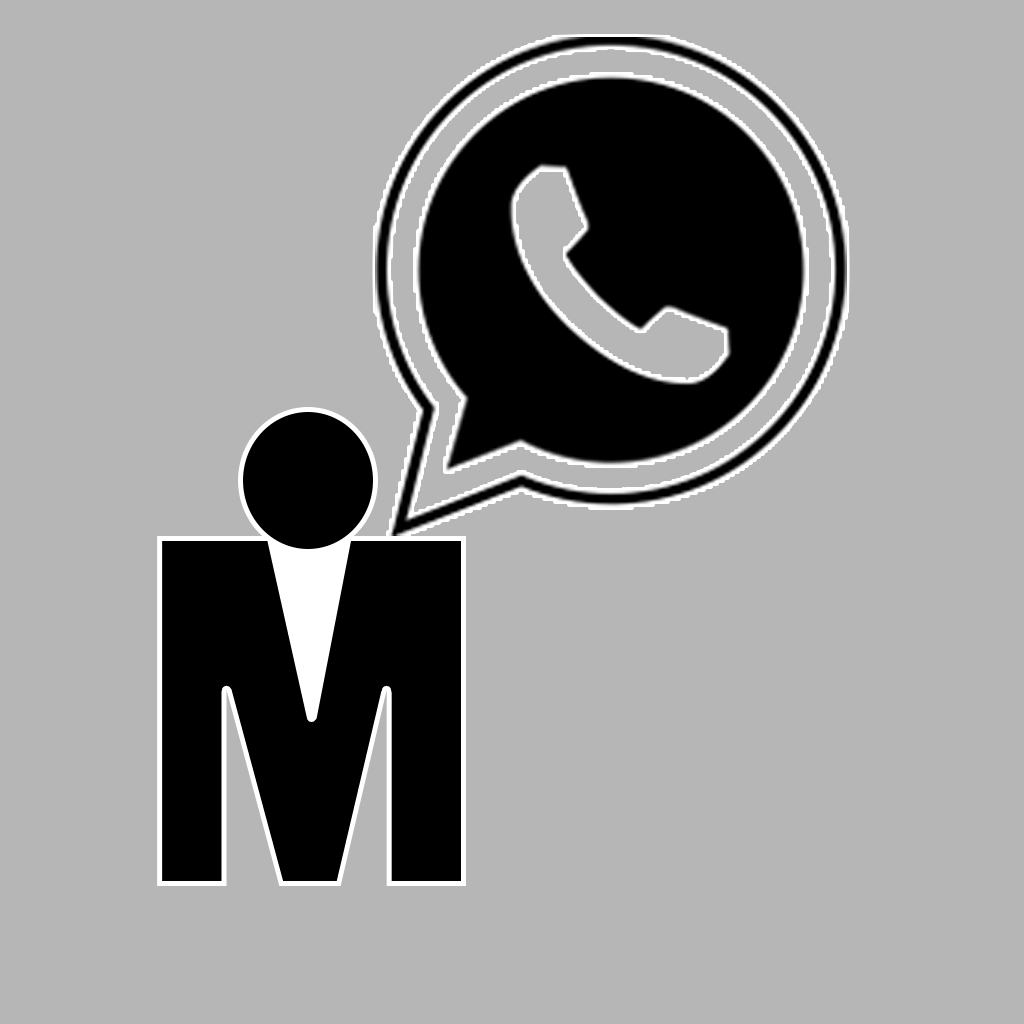
<style>
.page{position:relative;width:1024px;height:1024px;background:#b6b6b6}
.page>*{position:absolute;margin:0}
.t1{font:500.1px "Haettenschweiler";color:#000000;scale:1.15 1}
</style>
<div class="page">
<p class="t1" style="left:157px;top:536px;width:309px;height:350px">M</p>
</div>
